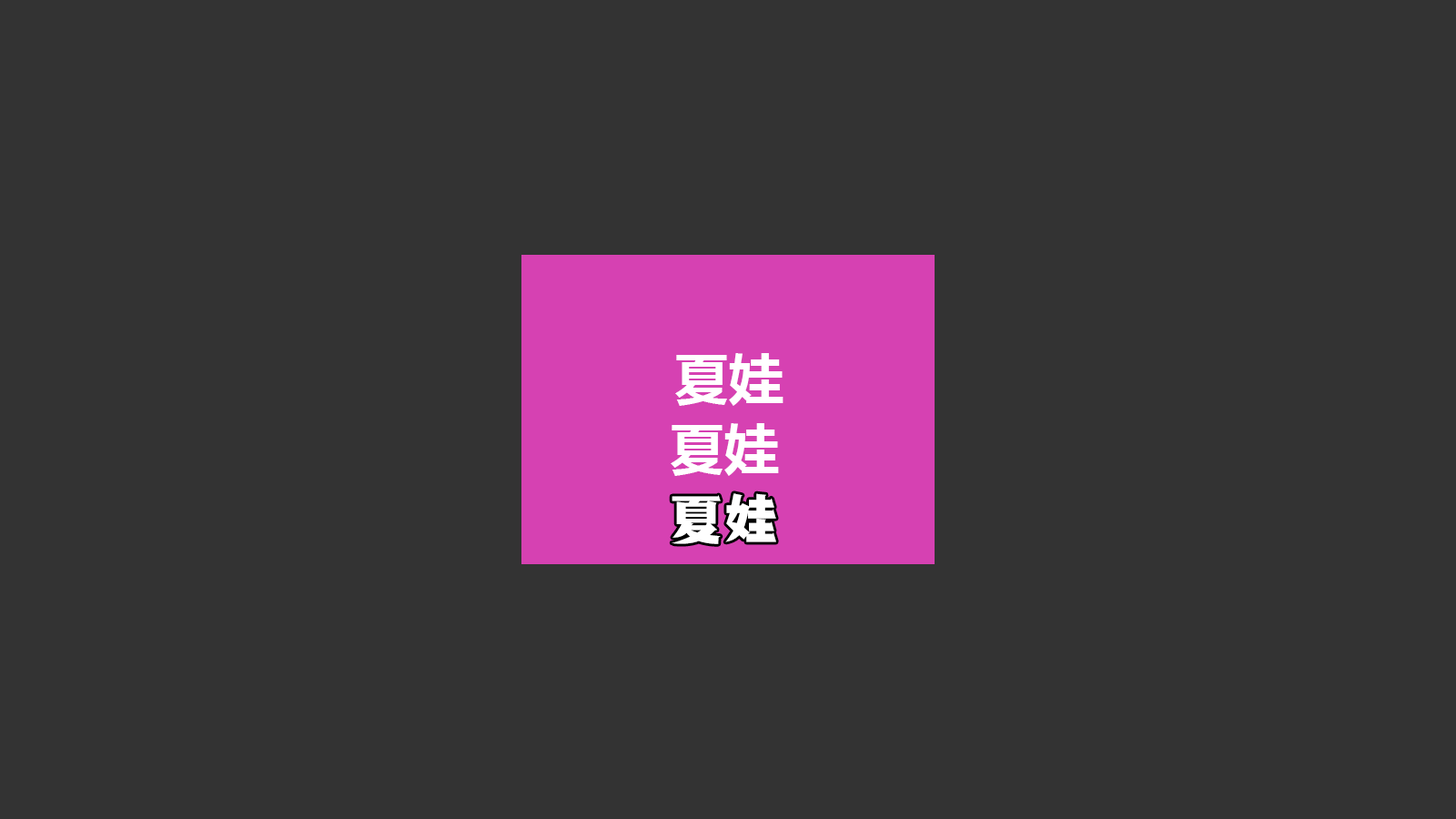
<style>
.page{position:relative;width:1456px;height:819px;background:#333333}
.page>*{position:absolute;margin:0}
.t1{font:54.6px "MicrosoftYaHei-Bold";color:#ffffff}
.t2{font:54.6px "FZYUEJJW--GB1-0";color:#ffffff}
</style>
<div class="page">
<p class="t1" style="left:675px;top:353px;width:108px;height:53px">夏娃</p>
<p class="t1" style="left:671px;top:423px;width:108px;height:53px">夏娃</p>
<p class="t2" style="left:672px;top:493px;width:104px;height:51px">夏娃</p>
</div>
